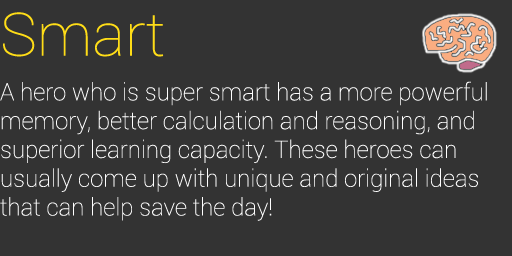
<style>
.page{position:relative;width:512px;height:256px;background:#333333}
.page>*{position:absolute;margin:0}
.t1{font:60px "Roboto-Thin";color:#ffdd17;scale:1.03 1}
.t2{font:24px "Roboto-Thin";color:#ffffff}
</style>
<div class="page">
<p class="t1" style="left:3px;top:12px;width:161px;height:45px">Smart</p>
<p class="t2" style="left:0px;top:81px;width:487px;height:140px">A hero who is super smart has a more powerful memory, better calculation and reasoning, and superior learning capacity. These heroes can <br>usually come up with unique and original ideas that can help save the day!</p>
</div>
